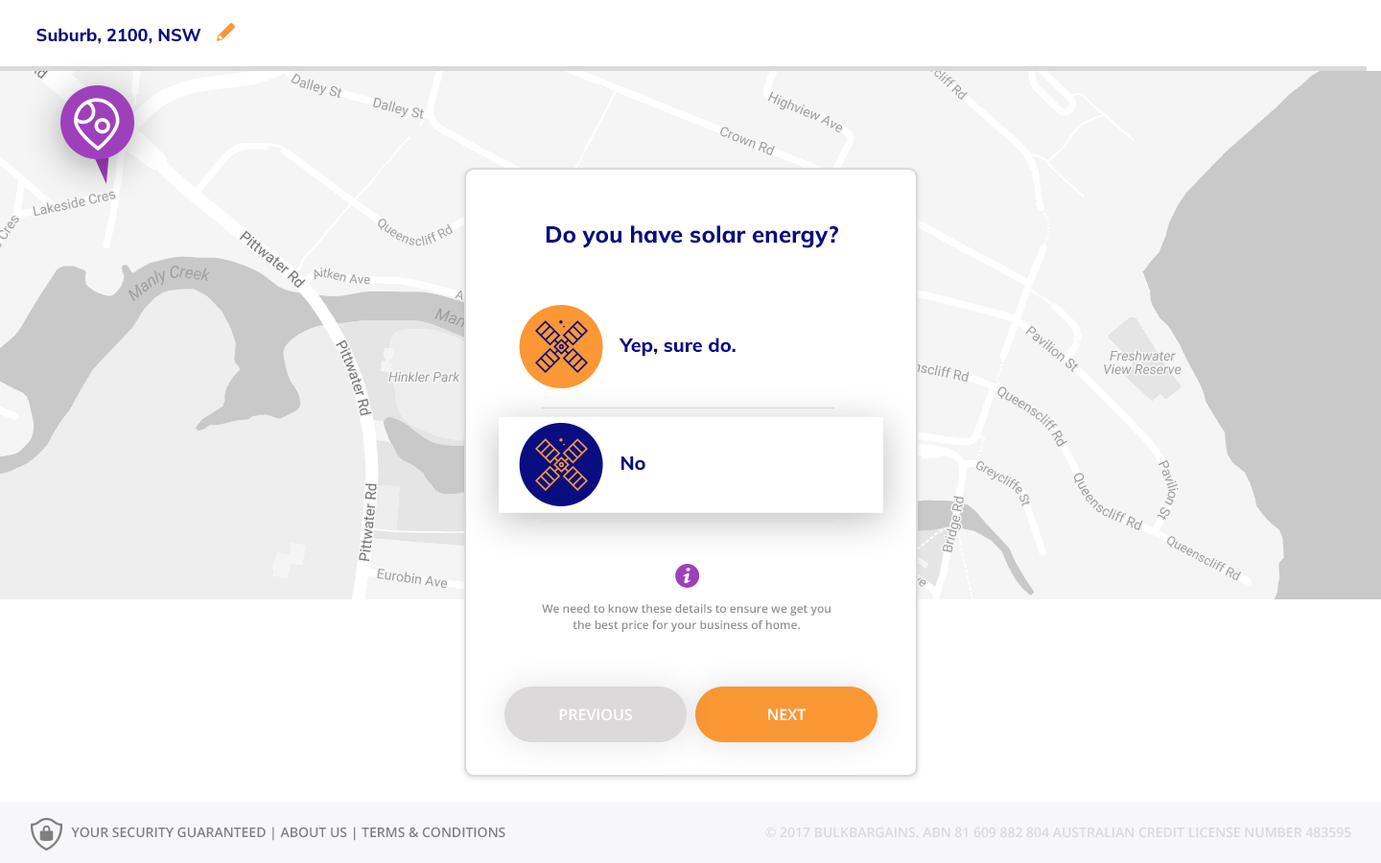
<style>
.page{position:relative;width:1381px;height:863px;background:#ffffff}
.page>*{position:absolute;margin:0}
.t1{font:17.3px "Muli-ExtraBold";color:#0a0d80}
.t2{font:23px "Muli-ExtraBold";color:#0a0d80}
.t3{font:19.1px "Muli-ExtraBold";color:#0a0d80}
.t4{font:11.5px/15.9px "OpenSans-Semibold";color:#918f8f}
.t5{font:15.4px "OpenSans-Semibold";color:#ffffff;text-transform:uppercase}
.t6{font:13.4px "OpenSans-Semibold";color:#807f7f;text-transform:uppercase}
.t7{font:13.4px "OpenSans-Semibold";color:#dbd9d9;text-transform:uppercase}
</style>
<div class="page">
<p class="t1" style="left:36px;top:28px;width:165px;height:16px">Suburb, 2100, NSW</p>
<p class="t2" style="left:546px;top:225px;width:292px;height:23px">Do you have solar energy?</p>
<p class="t3" style="left:619px;top:338px;width:117px;height:19px">Yep, sure do.</p>
<p class="t3" style="left:622px;top:457px;width:24px;height:14px">No</p>
<p class="t4" style="left:542px;top:604px;width:289px;height:28px;text-align:center">We need to know these details to ensure we get you the best price for your business of home.</p>
<p class="t5" style="left:559px;top:709px;width:73px;height:12px">Previous</p>
<p class="t5" style="left:768px;top:709px;width:38px;height:11px">NEXT</p>
<p class="t6" style="left:71px;top:827px;width:435px;height:14px">Your security guaranteed | about us | Terms &amp; Conditions</p>
<p class="t7" style="left:765px;top:827px;width:587px;height:11px">© 2017 Bulkbargains. ABN 81 609 882 804 Australian Credit License Number 483595</p>
</div>
